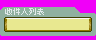
<style>
.page{position:relative;width:96px;height:40px;background:#90b0a0}
.page>*{position:absolute;margin:0}
.t1{font:8px "GuanZhi";color:#e0e8e8}
</style>
<div class="page">
<p class="t1" style="left:5px;top:8px;width:39px;height:7px">收件人列表</p>
</div>
